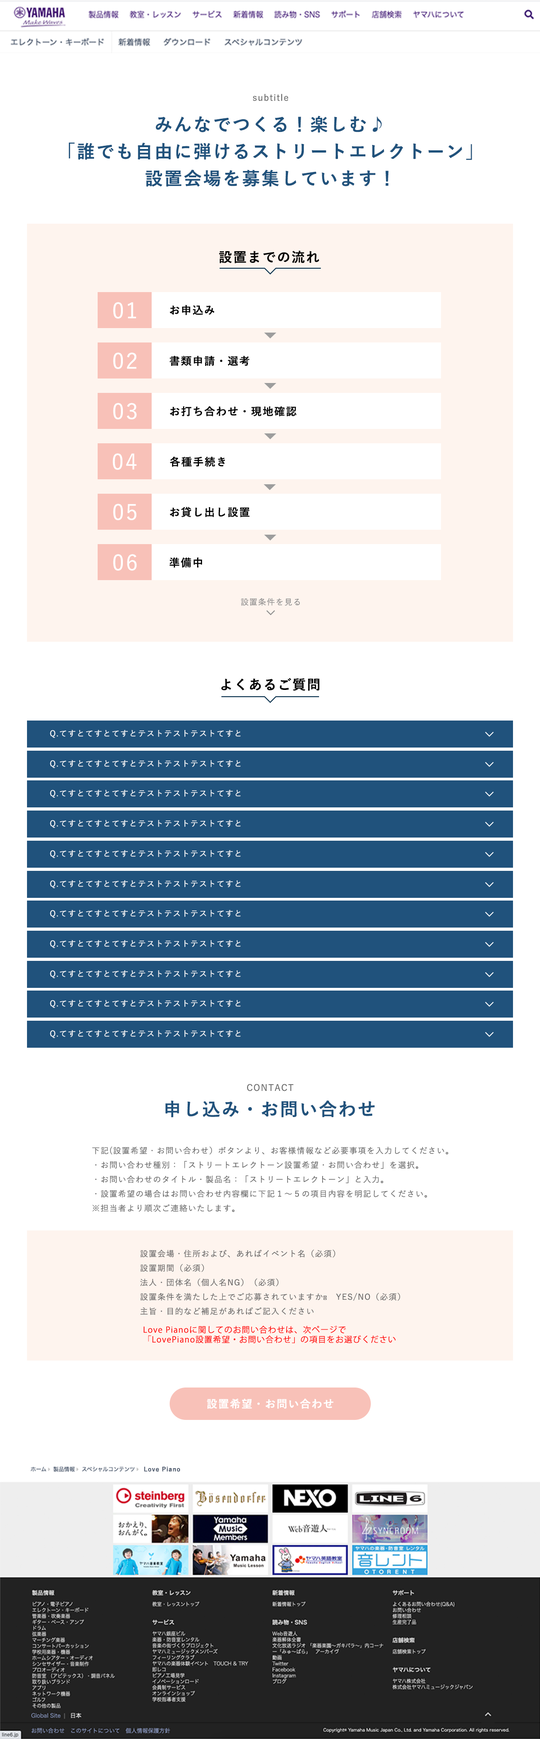
<style>
.page{position:relative;width:540px;height:1739px;background:#ffffff}
.page>*{position:absolute;margin:0}
.t1{font:9px "YuGo-Medium";letter-spacing:0.08em;color:#666666}
.t2{font:18px/27px "YuGo-Bold";letter-spacing:0.08em;color:#20527c}
.t3{font:13.5px "YuGo-Bold";letter-spacing:0.08em;color:#000000}
.t4{font:21.6px "YuGo-Medium";letter-spacing:0.08em;color:#ffffff}
.t5{font:10.8px "YuGo-Bold";letter-spacing:0.08em;color:#000000}
.t6{font:8.1px "YuGo-Medium";letter-spacing:0.08em;color:#8a8a8a}
.t7{font:8.1px "YuGo-Medium";letter-spacing:0.08em;color:#ffffff}
.t8{font:18px "YuGo-Bold";letter-spacing:0.08em;color:#20527c}
.t9{font:8.1px/14.4px "YuGo-Medium";letter-spacing:0.08em;color:#666666}
.t10{font:8.1px/14.4px "MyriadArabic-Regular";letter-spacing:0.08em;color:#666666}
.t11{font:8.1px "KozGoPr6N-Regular";letter-spacing:0.08em;color:#ff0000}
.t12{font:10.8px "YuGo-Bold";letter-spacing:0.08em;color:#ffffff}
.t13{font:6px "YuGo-Bold";letter-spacing:0.08em;color:#445166}
</style>
<div class="page">
<p class="t1" style="left:253px;top:94px;width:35px;height:7px">subtitle</p>
<p class="t2" style="left:69px;top:116px;width:403px;height:71px;text-align:center">みんなでつくる！楽しむ♪<br>「誰でも自由に弾けるストリートエレクトーン」<br>設置会場を募集しています！</p>
<p class="t3" style="left:219px;top:251px;width:101px;height:12px">設置までの流れ</p>
<p class="t4" style="left:113px;top:302px;width:23px;height:17px">01</p>
<p class="t5" style="left:170px;top:305px;width:45px;height:10px">お申込み</p>
<p class="t4" style="left:113px;top:352px;width:23px;height:17px">02</p>
<p class="t5" style="left:170px;top:356px;width:80px;height:10px">書類申請・選考</p>
<p class="t4" style="left:113px;top:403px;width:24px;height:16px">03</p>
<p class="t5" style="left:170px;top:406px;width:127px;height:10px">お打ち合わせ・現地確認</p>
<p class="t4" style="left:112px;top:453px;width:25px;height:17px">04</p>
<p class="t5" style="left:170px;top:456px;width:55px;height:11px">各種手続き</p>
<p class="t4" style="left:113px;top:504px;width:23px;height:16px">05</p>
<p class="t5" style="left:170px;top:507px;width:80px;height:10px">お貸し出し設置</p>
<p class="t4" style="left:113px;top:554px;width:24px;height:17px">06</p>
<p class="t5" style="left:170px;top:557px;width:32px;height:10px">準備中</p>
<p class="t6" style="left:241px;top:598px;width:59px;height:8px">設置条件を見る</p>
<p class="t3" style="left:221px;top:678px;width:99px;height:13px">よくあるご質問</p>
<p class="t7" style="left:50px;top:729px;width:191px;height:9px">Q.てすとてすとてすとテストテストテストてすと</p>
<p class="t7" style="left:50px;top:760px;width:191px;height:8px">Q.てすとてすとてすとテストテストテストてすと</p>
<p class="t7" style="left:50px;top:789px;width:191px;height:9px">Q.てすとてすとてすとテストテストテストてすと</p>
<p class="t7" style="left:50px;top:819px;width:191px;height:9px">Q.てすとてすとてすとテストテストテストてすと</p>
<p class="t7" style="left:50px;top:850px;width:191px;height:8px">Q.てすとてすとてすとテストテストテストてすと</p>
<p class="t7" style="left:50px;top:880px;width:191px;height:8px">Q.てすとてすとてすとテストテストテストてすと</p>
<p class="t7" style="left:50px;top:909px;width:191px;height:9px">Q.てすとてすとてすとテストテストテストてすと</p>
<p class="t7" style="left:50px;top:940px;width:191px;height:8px">Q.てすとてすとてすとテストテストテストてすと</p>
<p class="t7" style="left:50px;top:970px;width:191px;height:8px">Q.てすとてすとてすとテストテストテストてすと</p>
<p class="t7" style="left:50px;top:999px;width:191px;height:9px">Q.てすとてすとてすとテストテストテストてすと</p>
<p class="t7" style="left:50px;top:1030px;width:191px;height:8px">Q.てすとてすとてすとテストテストテストてすと</p>
<p class="t1" style="left:247px;top:1084px;width:46px;height:7px">CONTACT</p>
<p class="t8" style="left:165px;top:1100px;width:210px;height:17px">申し込み・お問い合わせ</p>
<p class="t9" style="left:92px;top:1146px;width:356px;height:66px">下記(設置希望・お問い合わせ）ボタンより、お客様情報など必要事項を入力してください。<br>・お問い合わせ種別：「ストリートエレクトーン設置希望・お問い合わせ」を選択。<br>・お問い合わせのタイトル・製品名：「ストリートエレクトーン」と入力。<br>・設置希望の場合はお問い合わせ内容欄に下記１～５の項目内容を明記してください。<br>※担当者より順次ご連絡いたします。</p>
<p class="t9" style="left:140px;top:1249px;width:260px;height:66px">設置会場・住所および、あればイベント名（必須）<br>設置期間（必須）<br>法人・団体名（個人名NG）（必須）<br>設置条件を満たした上でご応募されていますか<span class="t10">︖</span>　YES/NO（必須）<br>主旨・目的など補足があればご記入ください</p>
<p class="t11" style="left:144px;top:1325px;width:252px;height:18px">Love Pianoに関してのお問い合わせは、次ページで<br>「LovePiano設置希望・お問い合わせ」の項目をお選びください</p>
<p class="t12" style="left:207px;top:1398px;width:126px;height:11px">設置希望・お問い合わせ</p>
<p class="t13" style="left:144px;top:1467px;width:36px;height:5px">Love Piano</p>
</div>
